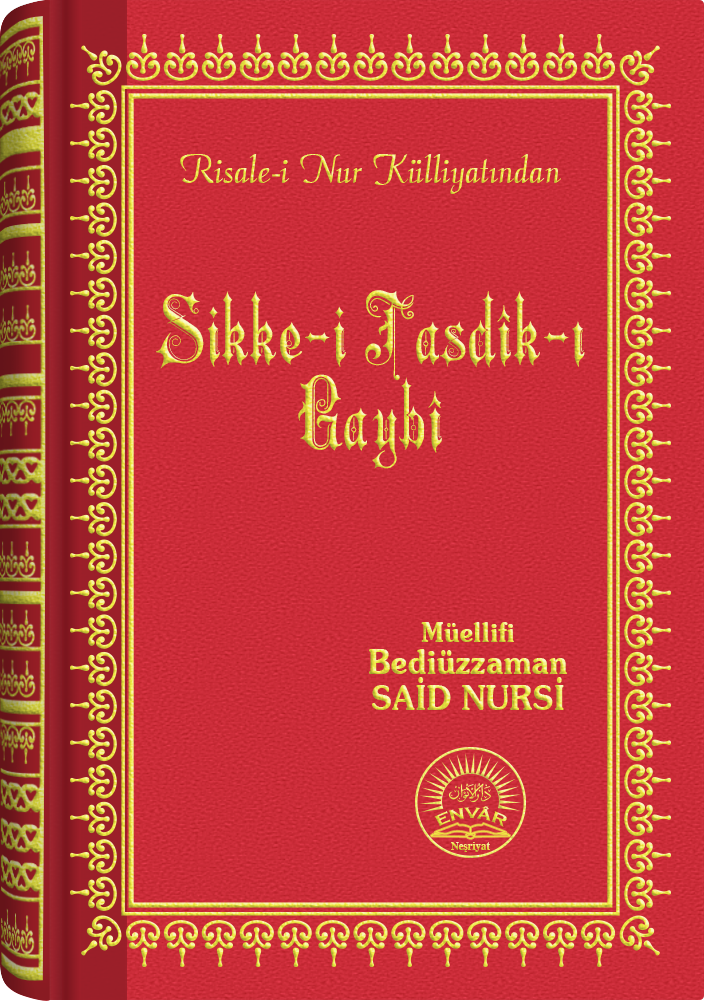
<style>
.page{position:relative;width:704px;height:1001px}
.page>*{position:absolute;margin:0}
.t1{font:45.3px "Barla © 072 Aria ScriptScriptSSi";scale:0.94 1}
.t2{font:96.1px/85.7px "Barla © 001 Liva Nur";letter-spacing:-0.001em;scale:0.92 1}
.t3{font:33.4px/32.4px "SouvenirITCbyBT-Demi";scale:0.93 1}
.t4{font:27.4px/24.4px "SouvenirITCbyBT-Demi";scale:0.93 1}
.t5{font:33.4px/36.4px "SouvenirITCbyBT-Demi";scale:0.93 1}
.t6{font:15.6px "CopperplateGothic-Bold"}
.t7{font:11.2px "Times-Bold";scale:0.96 1}
</style>
<div class="page">
<p class="t1" style="left:180px;top:154px;width:381px;height:40px">Risale-i Nur Külliyatından</p>
<p class="t2" style="left:156px;top:290px;width:429px;height:179px;text-align:center">Sikke-i Tasdîk-ı<br>Gaybî</p>
<p class="t3" style="left:369px;top:622px;width:198px;height:88px;text-align:center"><span class="t4">Müellifi<br></span>Bediüzzaman<br><span class="t5">SAİD NURSİ</span></p>
<p class="t6" style="left:434px;top:806px;width:73px;height:21px">ENVÂR</p>
<p class="t7" style="left:451px;top:842px;width:39px;height:10px">Neşriyat</p>
</div>
